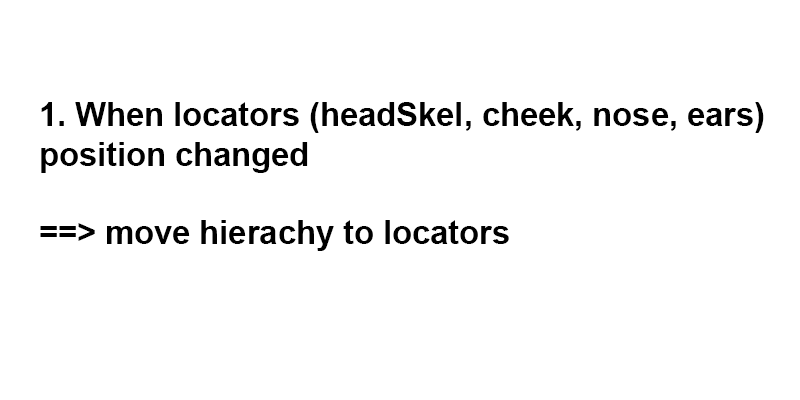
<style>
.page{position:relative;width:800px;height:400px;background:#ffffff}
.page>*{position:absolute;margin:0}
.t1{font:32.7px "Arial-BoldMT";color:#000000}
</style>
<div class="page">
<p class="t1" style="left:40px;top:102px;width:724px;height:149px">1. When locators (headSkel, cheek, nose, ears) <br>position changed <br><br>==&gt; move hierachy to locators</p>
</div>
